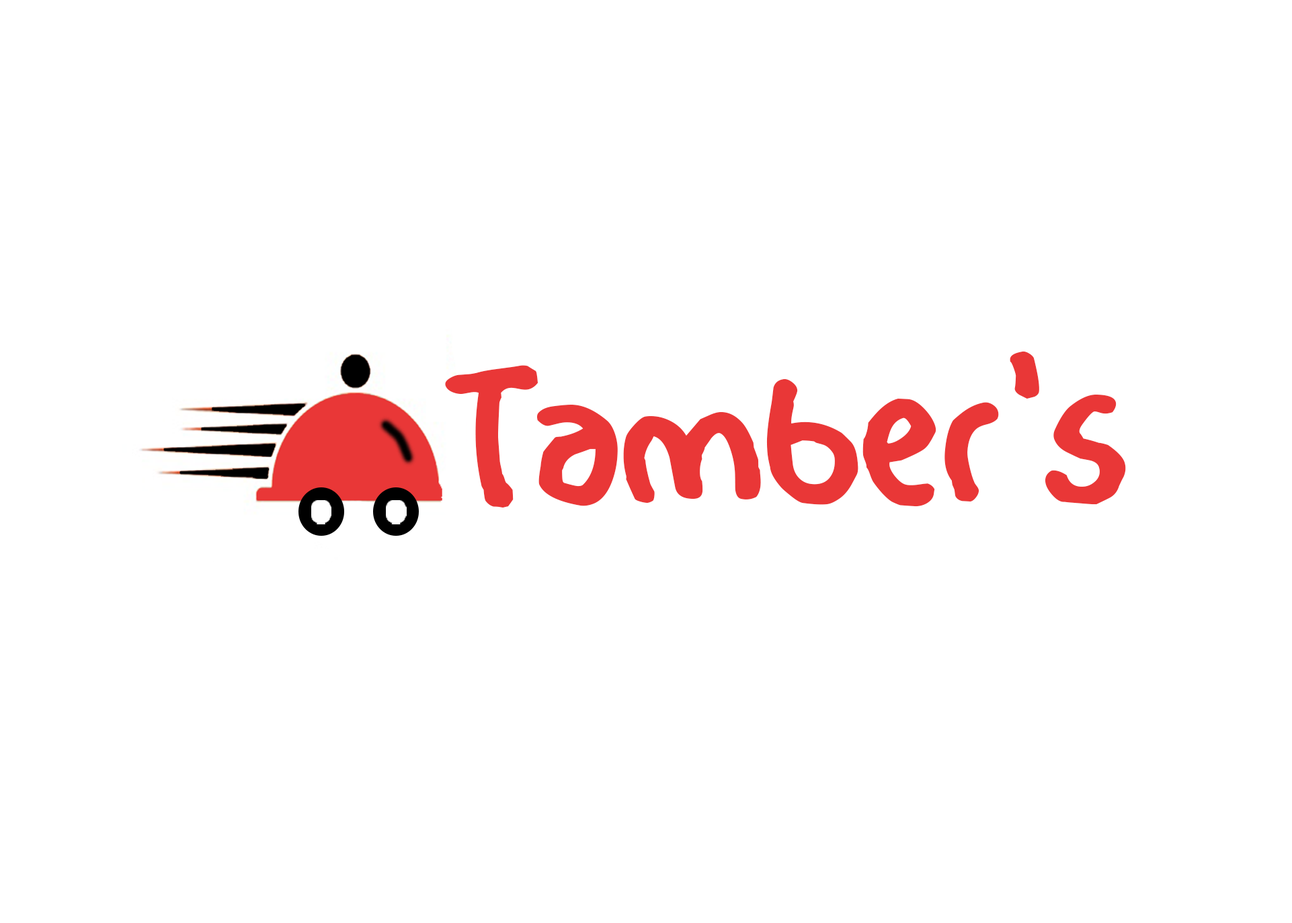
<style>
.page{position:relative;width:1292px;height:923px;background:#ffffff}
.page>*{position:absolute;margin:0}
.t1{font:238.1px "InternationalPlayboy";color:#e93737;scale:0.94 1}
</style>
<div class="page">
<p class="t1" style="left:445px;top:351px;width:681px;height:157px">Tamber's</p>
</div>
